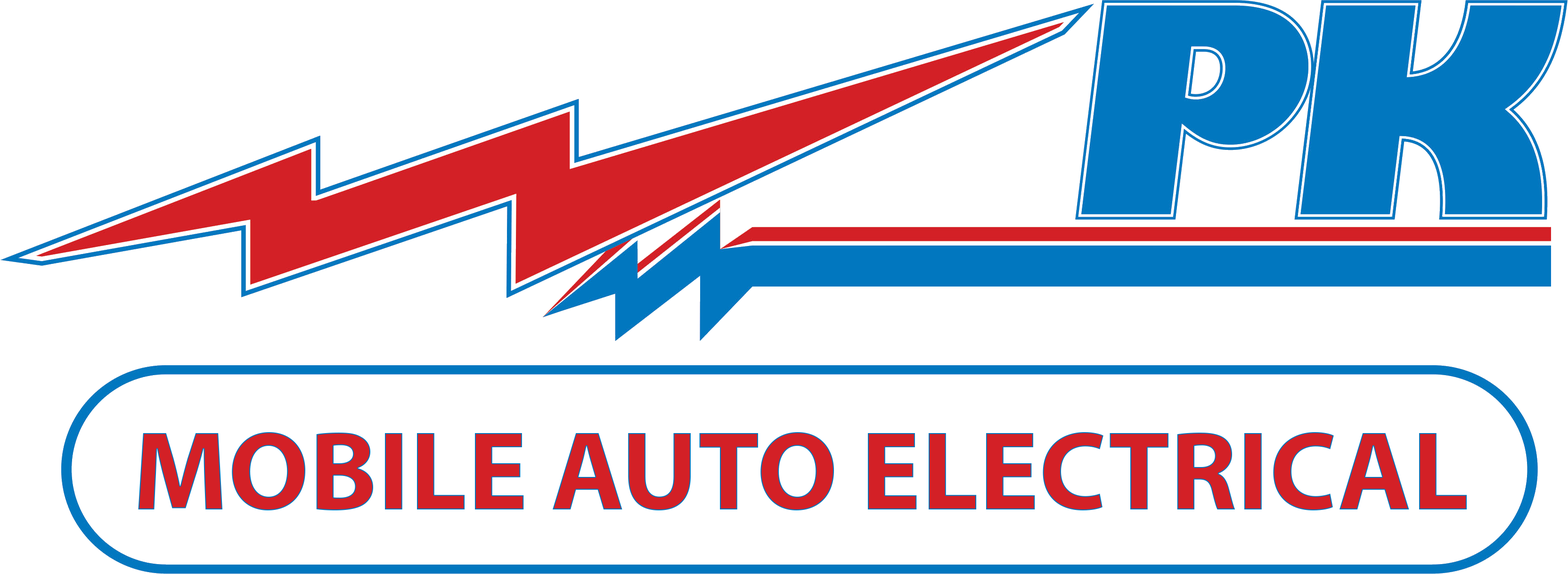
<style>
.page{position:relative;width:1568px;height:574px;background:#ffffff}
.page>*{position:absolute;margin:0}
.t1{font:113.1px "MyriadPro-Bold";color:#d32026}
</style>
<div class="page">
<p class="t1" style="left:138px;top:432px;width:1329px;height:78px">MOBILE AUTO ELECTRICAL</p>
</div>
